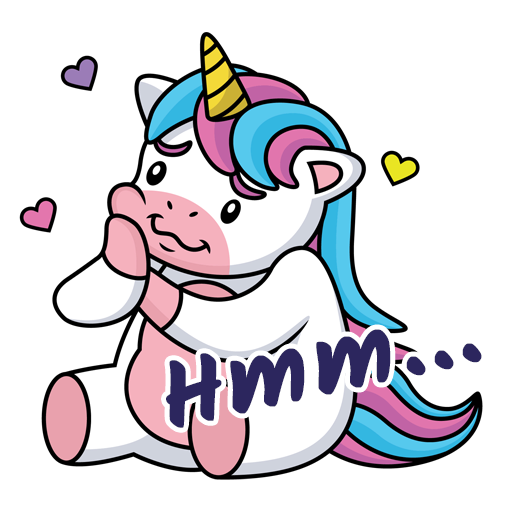
<style>
.page{position:relative;width:512px;height:512px;background:#ffffff}
.page>*{position:absolute;margin:0}
.t1{font:100px "Kalam-Bold";letter-spacing:0.025em;color:#2c265e;font-weight:bold}
</style>
<div class="page">
<p class="t1" style="left:166px;top:329px;width:316px;height:99px;rotate:-13deg">Hmm...</p>
</div>
